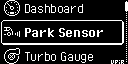
<style>
.page{position:relative;width:128px;height:64px;background:#000000}
.page>*{position:absolute;margin:0}
.t1{font:16px "PixelOperator";letter-spacing:-0.025em;color:#ffffff}
.t2{font:16px "PixelOperator-Bold";letter-spacing:-0.025em;color:#ffffff}
</style>
<div class="page">
<p class="t1" style="left:25px;top:4px;width:58px;height:9px">Dashboard</p>
<p class="t2" style="left:25px;top:28px;width:78px;height:9px">Park Sensor</p>
<p class="t1" style="left:25px;top:52px;width:68px;height:11px">Turbo Gauge</p>
</div>
